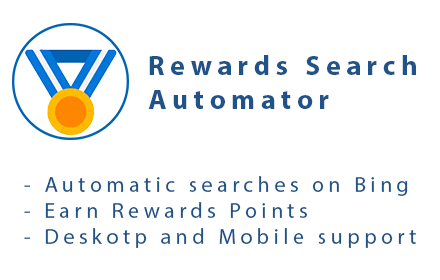
<style>
.page{position:relative;width:440px;height:280px;background:#ffffff}
.page>*{position:absolute;margin:0}
.t1{font:28px "MyriadPro-Bold";letter-spacing:0.2em;color:#205388}
.t2{font:22px "MyriadPro-Regular";letter-spacing:0.2em;color:#205388}
</style>
<div class="page">
<p class="t1" style="left:148px;top:55px;width:268px;height:54px">Rewards Search <br>Automator</p>
<p class="t2" style="left:24px;top:176px;width:392px;height:72px">- Automatic searches on Bing<br>- Earn Rewards Points<br>- Deskotp and Mobile support</p>
</div>
